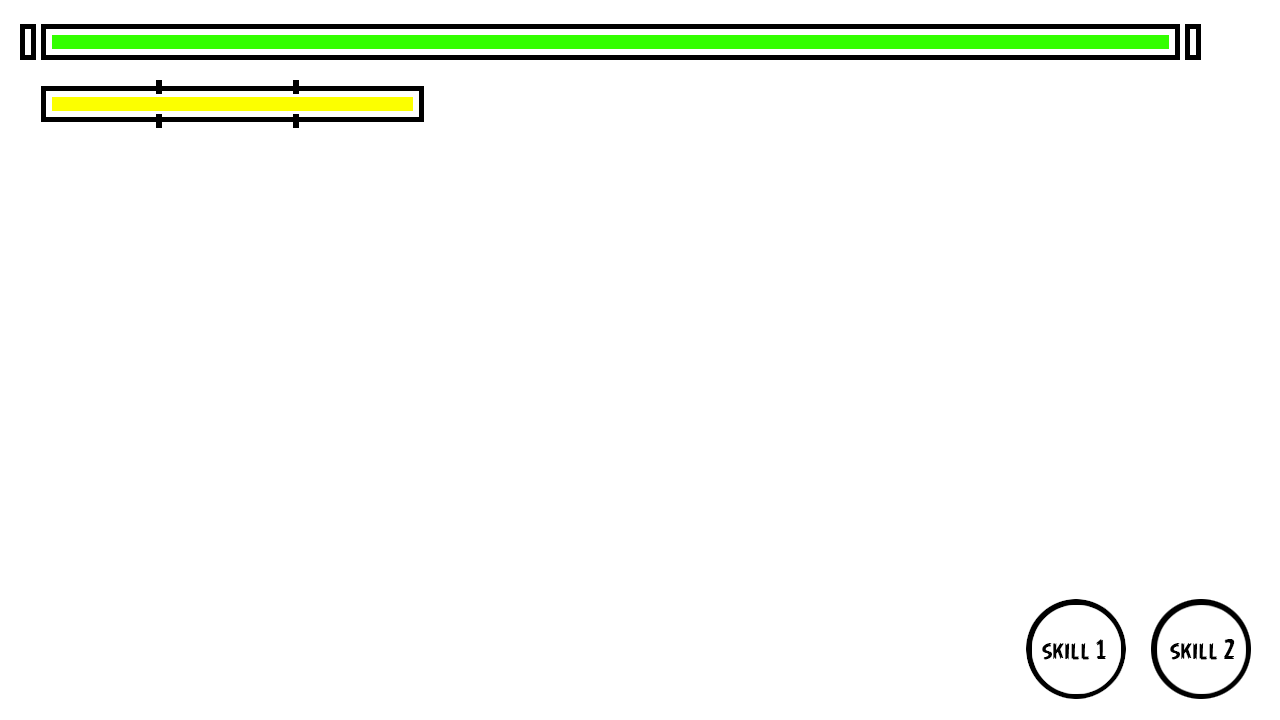
<style>
.page{position:relative;width:1280px;height:720px;background:#ffffff}
.page>*{position:absolute;margin:0}
.t1{font:25px "AngryBirds-Regular";color:#000000}
</style>
<div class="page">
<p class="t1" style="left:1042px;top:639px;width:64px;height:21px">skill 1</p>
<p class="t1" style="left:1170px;top:639px;width:65px;height:21px">skill 2</p>
</div>
